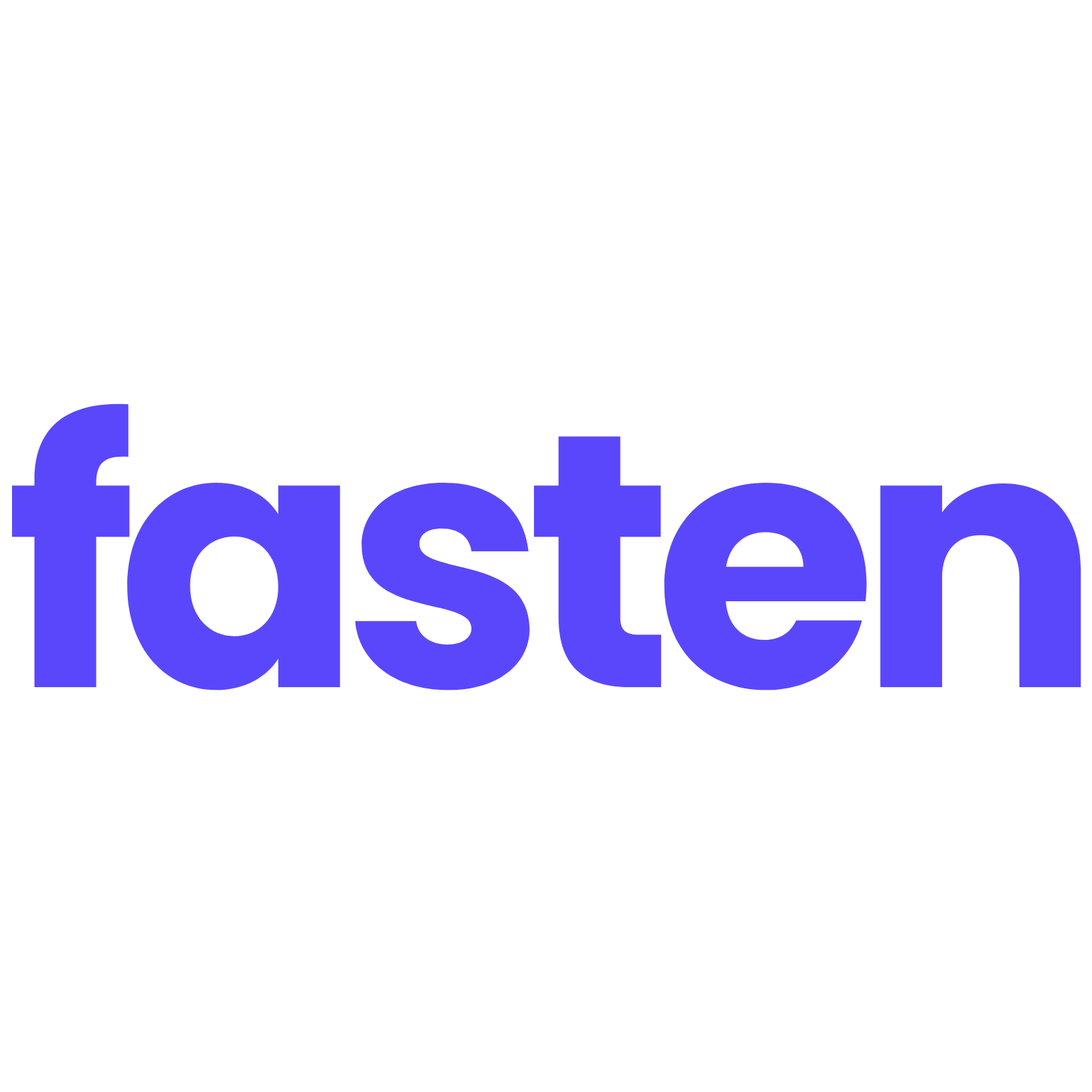
<style>
.page{position:relative;width:1092px;height:1092px;background:#ffffff}
.page>*{position:absolute;margin:0}
.t1{font:361.2px "Poppins-Bold";letter-spacing:-0.052em;color:#5b47fb}
</style>
<div class="page">
<p class="t1" style="left:12px;top:404px;width:1069px;height:286px">fasten</p>
</div>
